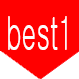
<style>
.page{position:relative;width:79px;height:79px;background:#ff0000}
.page>*{position:absolute;margin:0}
.t1{font:47.6px "Gulim";color:#fcfcfc;scale:0.54 1}
</style>
<div class="page">
<p class="t1" style="left:8px;top:16px;width:59px;height:34px">best1</p>
</div>
